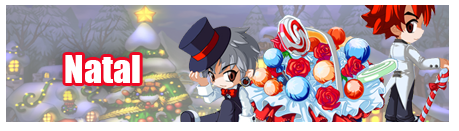
<style>
.page{position:relative;width:459px;height:131px}
.page>*{position:absolute;margin:0}
.t1{font:36.1px "Impact";color:#ffffff}
</style>
<div class="page">
<p class="t1" style="left:65px;top:55px;width:75px;height:28px">Natal</p>
</div>
